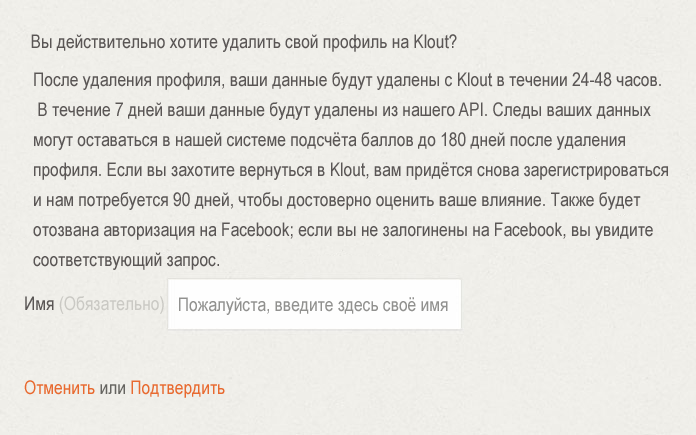
<style>
.page{position:relative;width:696px;height:435px;background:#f0efea}
.page>*{position:absolute;margin:0}
.t1{font:19px "ArialNarrow";color:#5a5655}
.t2{font:19px/30px "ArialNarrow";color:#5a5655}
.t3{font:19px "ArialNarrow";color:#cac9c4}
.t4{font:19px "ArialNarrow";color:#91918f}
.t5{font:19px "ArialNarrow";color:#e86a30}
.t6{font:19px "ArialNarrow";color:#666561}
</style>
<div class="page">
<p class="t1" style="left:31px;top:34px;width:426px;height:18px">Вы действительно хотите удалить свой профиль на Klout?</p>
<p class="t2" style="left:33px;top:72px;width:635px;height:198px">После удаления профиля, ваши данные будут удалены с Klout в течении 24-48 часов.<br> В течение 7 дней ваши данные будут удалены из нашего API. Следы ваших данных <br>могут оставаться в нашей системе подсчёта баллов до 180 дней после удаления <br>профиля. Если вы захотите вернуться в Klout, вам придётся снова зарегистрироваться <br>и нам потребуется 90 дней, чтобы достоверно оценить ваше влияние. Также будет <br>отозвана авторизация на Facebook; если вы не залогинены на Facebook, вы увидите <br>соответствующий запрос.</p>
<p class="t3" style="left:25px;top:296px;width:139px;height:18px"><span class="t1">Имя </span>(Обязательно)</p>
<p class="t4" style="left:179px;top:297px;width:269px;height:18px">Пожалуйста, введите здесь своё имя</p>
<p class="t5" style="left:24px;top:380px;width:201px;height:18px">Отменить <span class="t6">или </span>Подтвердить</p>
</div>
